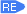
<style>
.page{position:relative;width:27px;height:14px;background:#427df2}
.page>*{position:absolute;margin:0}
.t1{font:11px "Gulim";letter-spacing:-0.02em;color:#fcfdfc}
</style>
<div class="page">
<p class="t1" style="left:3px;top:3px;width:13px;height:8px">RE</p>
</div>
